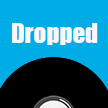
<style>
.page{position:relative;width:108px;height:108px;background:#00ace5}
.page>*{position:absolute;margin:0}
.t1{font:25px "Impact";color:#f9f8f8}
</style>
<div class="page">
<p class="t1" style="left:12px;top:23px;width:86px;height:22px">Dropped</p>
</div>
